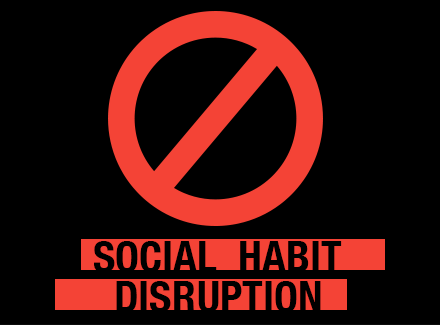
<style>
.page{position:relative;width:440px;height:325px;background:#000000}
.page>*{position:absolute;margin:0}
.t1{font:43px/39.5px "HelveticaNeue-CondensedBold";color:#000000;text-transform:uppercase}
</style>
<div class="page">
<p class="t1" style="left:94px;top:241px;width:248px;height:71px">Social  Habit <br>  Disruption</p>
</div>
